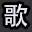
<style>
.page{position:relative;width:32px;height:32px;background:#000000}
.page>*{position:absolute;margin:0}
.t1{font:25.3px "AdobeHeitiStd-Regular";color:#eaecf3}
</style>
<div class="page">
<p class="t1" style="left:4px;top:3px;width:24px;height:24px">歌</p>
</div>
